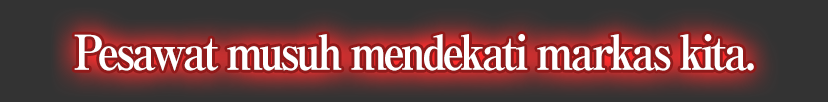
<style>
.page{position:relative;width:828px;height:102px;background:#333333}
.page>*{position:absolute;margin:0}
.t1{font:48px "RyuminPro-ExBold";letter-spacing:-0.08em;color:#ffffff;scale:0.9 1}
</style>
<div class="page">
<p class="t1" style="left:74px;top:34px;width:680px;height:37px">Pesawat musuh mendekati markas kita.</p>
</div>
